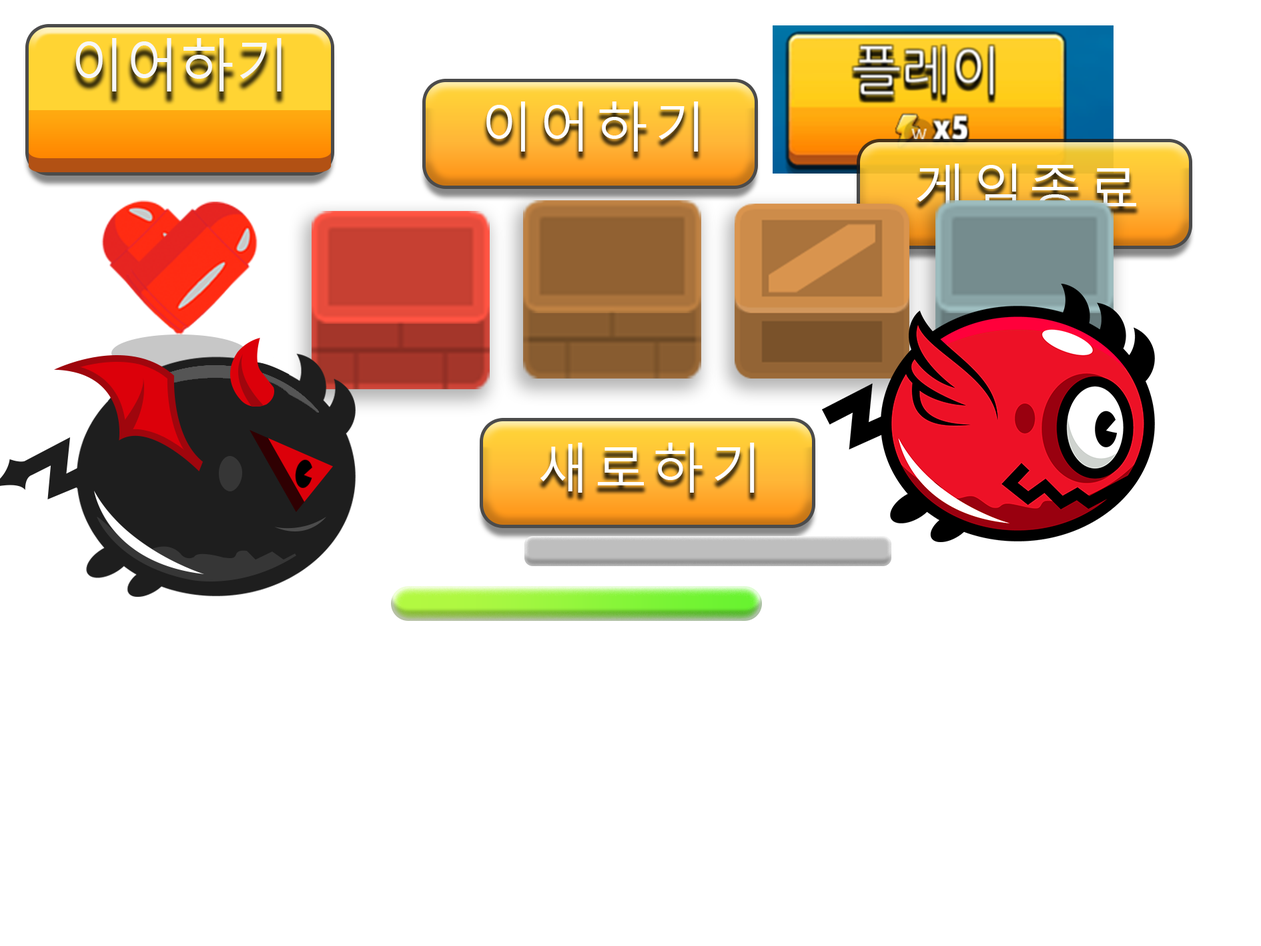
<style>
.page{position:relative;width:1261px;height:946px;background:#ffffff}
.page>*{position:absolute;margin:0}
.t1{font:57px "MalgunGothic";color:#f7f7f7}
.t2{font:53.7px "MalgunGothic";letter-spacing:0.1em;color:#ffffff}
</style>
<div class="page">
<p class="t1" style="left:75px;top:38px;width:207px;height:53px">이어하기</p>
<p class="t2" style="left:486px;top:101px;width:213px;height:50px">이어하기</p>
<p class="t2" style="left:917px;top:163px;width:219px;height:51px">게임종료</p>
<p class="t2" style="left:540px;top:442px;width:215px;height:50px">새로하기</p>
</div>
